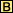
<style>
.page{position:relative;width:13px;height:13px;background:#000000}
.page>*{position:absolute;margin:0}
.t1{font:12px "ArialMT";letter-spacing:0.1em;color:#000000;font-weight:bold}
</style>
<div class="page">
<p class="t1" style="left:3px;top:2px;width:8px;height:10px">B</p>
</div>
